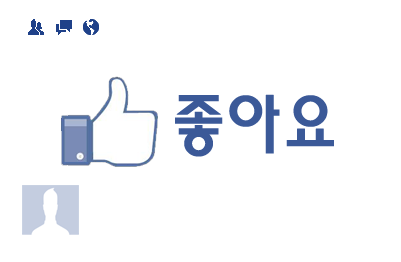
<style>
.page{position:relative;width:401px;height:262px;background:#ffffff}
.page>*{position:absolute;margin:0}
.t1{font:66px "MoeumTR-HM";color:#3b5998;font-weight:bold}
</style>
<div class="page">
<p class="t1" style="left:175px;top:94px;width:159px;height:63px">좋아요</p>
</div>
